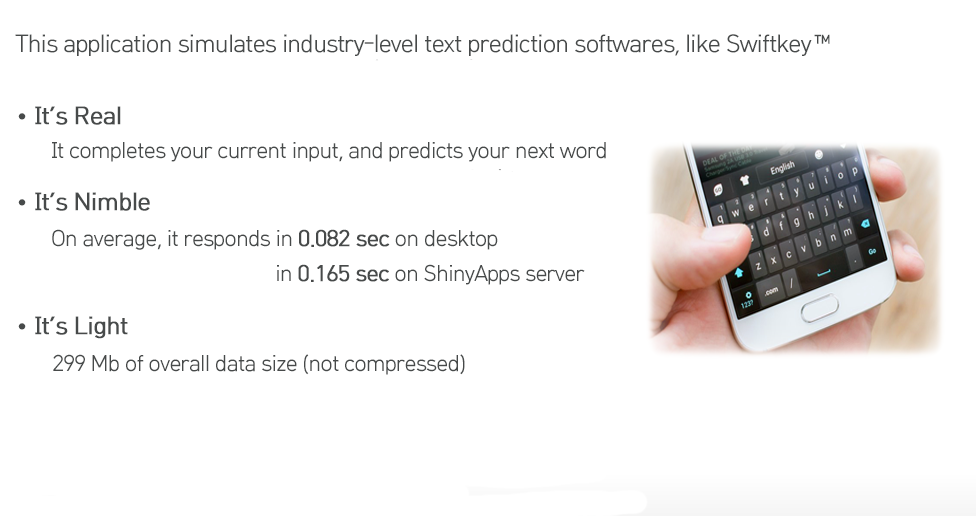
<style>
.page{position:relative;width:976px;height:516px;background:#ffffff}
.page>*{position:absolute;margin:0}
.t1{font:24px "HCRDotum";letter-spacing:-0.05em;color:#474a4a}
.t2{font:24px "HCRDotum";letter-spacing:-0.05em;color:#474a4a;font-weight:bold}
.t3{font:22px "HCRDotum";letter-spacing:-0.05em;color:#474a4a}
.t4{font:22px "HCRDotum";letter-spacing:-0.05em;color:#474a4a;font-weight:bold}
</style>
<div class="page">
<p class="t1" style="left:15px;top:34px;width:815px;height:22px">This application simulates industry-level text prediction softwares, like Swiftkey™</p>
<p class="t2" style="left:18px;top:106px;width:103px;height:19px"><span class="t1">• </span>It’s Real</p>
<p class="t3" style="left:52px;top:142px;width:554px;height:20px">It completes your current input, and predicts your next word</p>
<p class="t2" style="left:18px;top:192px;width:132px;height:19px"><span class="t1">• </span>It’s Nimble</p>
<p class="t3" style="left:52px;top:229px;width:446px;height:21px">On average, it responds in <span class="t4">0.082 sec</span> on desktop</p>
<p class="t3" style="left:277px;top:264px;width:308px;height:21px">in <span class="t4">0.165 sec</span> on ShinyApps server</p>
<p class="t2" style="left:18px;top:316px;width:110px;height:23px"><span class="t1">• </span>It’s Light</p>
<p class="t3" style="left:53px;top:354px;width:412px;height:21px">299 Mb of overall data size (not compressed)</p>
</div>
